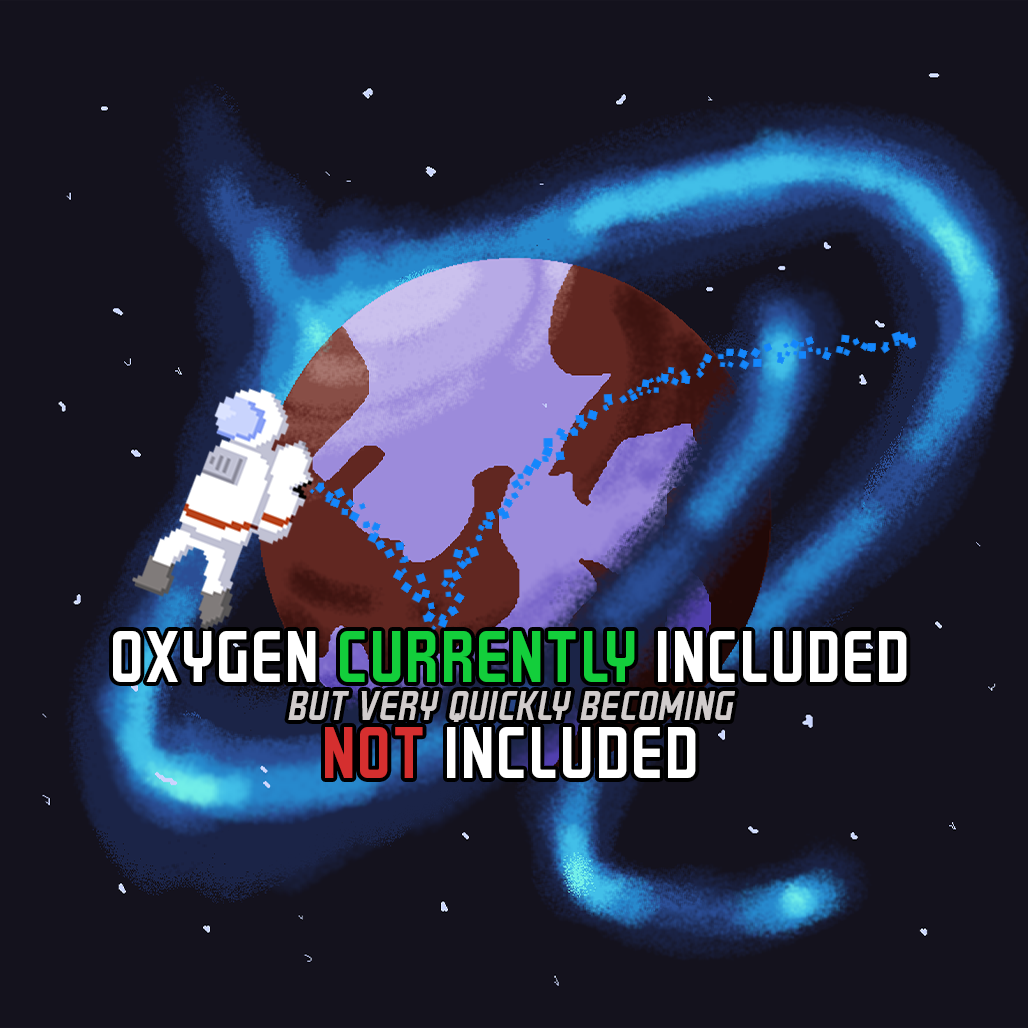
<style>
.page{position:relative;width:1028px;height:1028px;background:#14121d}
.page>*{position:absolute;margin:0}
.t1{font:33.3px/37.5px "GRAYSTROKE-Italic";color:#d1cccc}
.t2{font:58.3px/33.3px "GRAYSTROKE";color:#ffffff}
.t3{font:58.3px/33.3px "GRAYSTROKE";color:#13ce3b}
.t4{font:58.3px/58.3px "GRAYSTROKE";color:#d52f2f}
.t5{font:58.3px/58.3px "GRAYSTROKE";color:#ffffff}
</style>
<div class="page">
<p class="t1" style="left:113px;top:631px;width:794px;height:147px;text-align:center"><span class="t2">OXYGEN </span><span class="t3">CURRENTLY</span><span class="t2"> INCLUDED<br></span>BUT VERY QUICKLY BECOMING<br><span class="t4">NOT</span><span class="t5"> INCLUDED</span></p>
</div>
